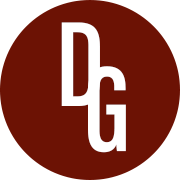
<style>
.page{position:relative;width:180px;height:180px;background:#6c1204}
.page>*{position:absolute;margin:0}
.t1{font:125px "AcuminConcept-ExtraCondensedSemibold";color:#ffffff}
</style>
<div class="page">
<p class="t1" style="left:61px;top:22px;width:39px;height:84px">D</p>
<p class="t1" style="left:88px;top:66px;width:38px;height:87px">G</p>
</div>
